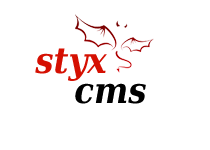
<style>
.page{position:relative;width:210px;height:150px;background:#ffffff}
.page>*{position:absolute;margin:0}
.t1{font:36px/30px "DejaVuSerifCondensed-BoldItalic";color:#d51002}
.t2{font:36px/30px "DejaVuSerifCondensed-BoldItalic";color:#000000}
</style>
<div class="page">
<p class="t1" style="left:35px;top:48px;width:111px;height:56px;text-align:center">styx<br>       <span class="t2">cms</span></p>
</div>
